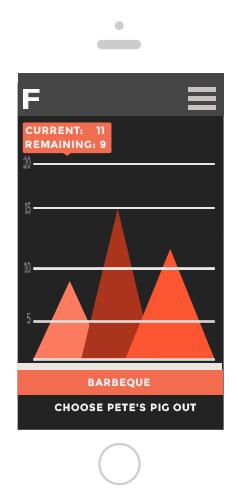
<style>
.page{position:relative;width:238px;height:504px;background:#ffffff}
.page>*{position:absolute;margin:0}
.t1{font:28.7px "Montserrat-Bold";letter-spacing:0.06em;color:#ffffff;text-transform:uppercase;scale:1.2 1}
.t2{font:10.1px "Montserrat-Bold";letter-spacing:0.06em;color:#ffffff;text-transform:uppercase}
.t3{font:13.5px "Arvo";letter-spacing:0.01em;color:#828890;scale:0.42 1}
.t4{font:14.1px "Arvo";letter-spacing:0.01em;color:#828890;scale:0.42 1}
</style>
<div class="page">
<p class="t1" style="left:23px;top:89px;width:17px;height:20px">f</p>
<p class="t2" style="left:25px;top:126px;width:58px;height:9px">Current:</p>
<p class="t2" style="left:96px;top:126px;width:9px;height:9px">11</p>
<p class="t2" style="left:25px;top:140px;width:81px;height:9px">Remaining: 9</p>
<p class="t3" style="left:23px;top:156px;width:8px;height:13px">20</p>
<p class="t3" style="left:25px;top:202px;width:6px;height:12px">15</p>
<p class="t3" style="left:24px;top:262px;width:7px;height:11px">10</p>
<p class="t4" style="left:27px;top:313px;width:4px;height:11px">5</p>
<p class="t2" style="left:88px;top:378px;width:62px;height:10px">barbeque</p>
<p class="t2" style="left:54px;top:403px;width:143px;height:9px">Choose Pete's Pig out Out</p>
</div>
